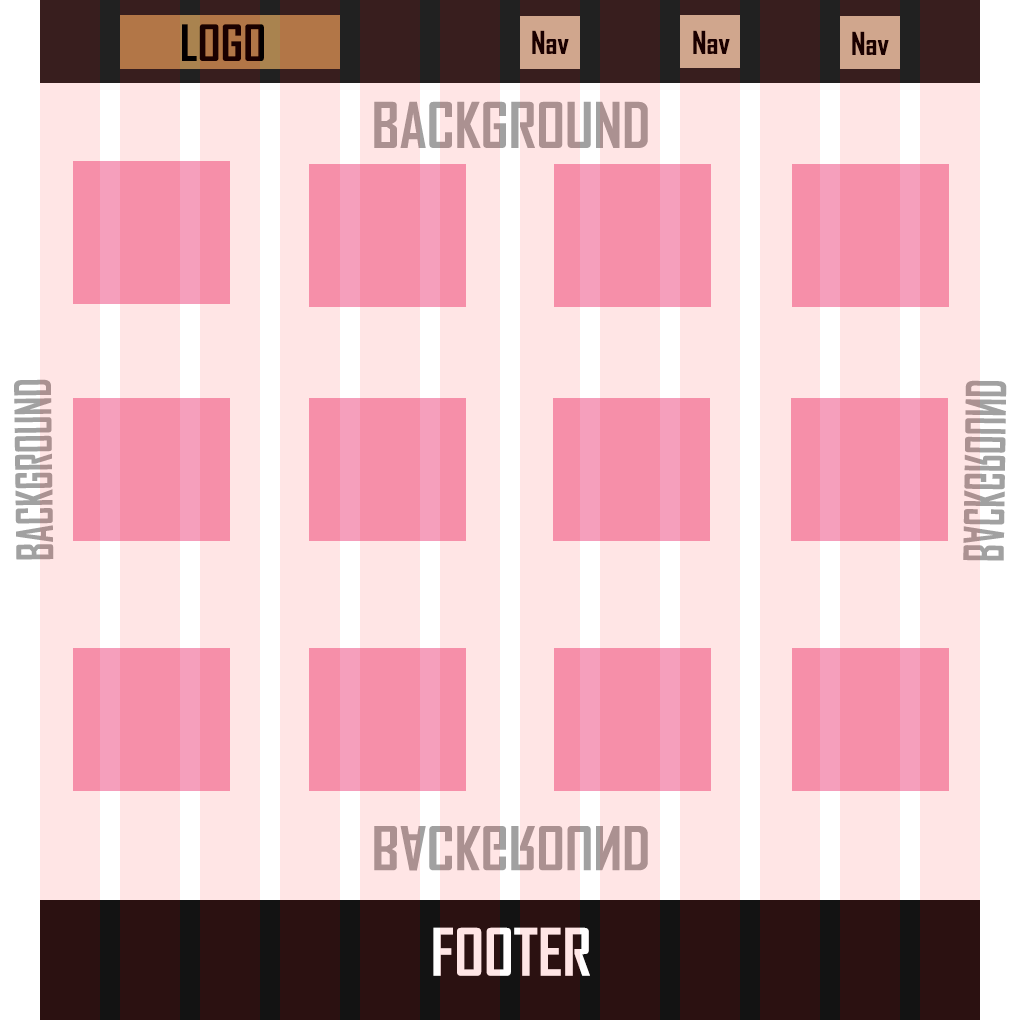
<style>
.page{position:relative;width:1020px;height:1020px;background:#ffe5e5}
.page>*{position:absolute;margin:0}
.t1{font:48px "AgencyFB-Bold";color:#1a0000}
.t2{font:30px "AgencyFB-Bold";color:#1a0000}
.t3{font:60px "AgencyFB-Bold";color:#ab9191}
.t4{font:48px "AgencyFB-Bold";color:#a1a1a1;scale:0.82 1}
.t5{font:52.6px "AgencyFB-Bold";color:#a1a1a1;scale:0.75 1}
.t6{font:57.7px "AgencyFB-Bold";color:#ab9191;scale:1.04 1}
.t7{font:62.3px "AgencyFB-Bold";color:#ffe5e5}
</style>
<div class="page">
<p class="t1" style="left:182px;top:24px;width:82px;height:37px">LOGO</p>
<p class="t2" style="left:532px;top:30px;width:37px;height:24px">Nav</p>
<p class="t2" style="left:693px;top:30px;width:37px;height:24px">Nav</p>
<p class="t2" style="left:852px;top:31px;width:37px;height:24px">Nav</p>
<p class="t3" style="left:374px;top:101px;width:274px;height:47px">BACKGROUND</p>
<p class="t4" style="left:14px;top:379px;width:40px;height:181px;rotate:-91deg">BACKGROUND</p>
<p class="t5" style="left:963px;top:380px;width:44px;height:181px;rotate:-89deg">BACKGROUND</p>
<p class="t6" style="left:374px;top:826px;width:274px;height:45px">BACKGROUND</p>
<p class="t7" style="left:433px;top:927px;width:157px;height:49px">FOOTER</p>
</div>
